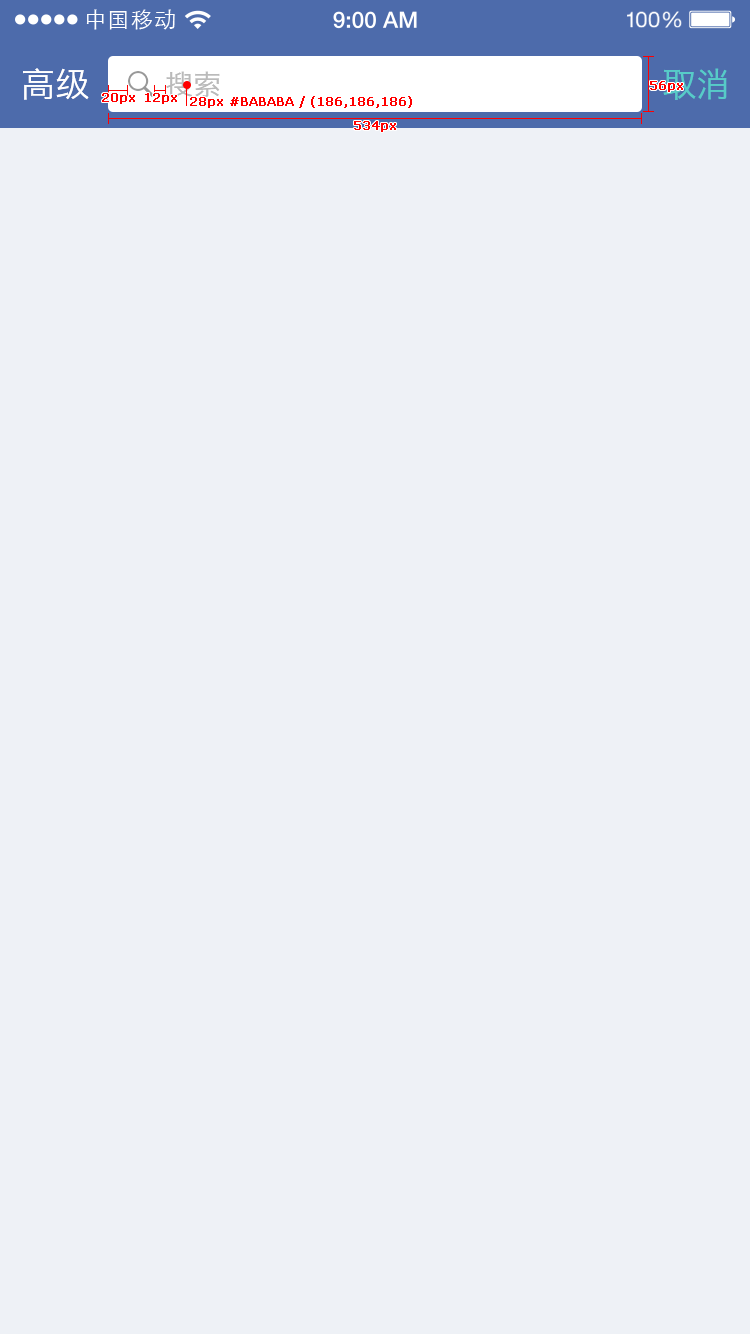
<style>
.page{position:relative;width:750px;height:1334px;background:#eef1f6}
.page>*{position:absolute;margin:0}
.t1{font:21.9px "STXihei";letter-spacing:0.04em;color:#ffffff}
.t2{font:34px "HiraginoSansGB-W3";color:#ffffff}
.t3{font:28px "HiraginoSansGB-W3";color:#bababa}
.t4{font:34px "HiraginoSansGB-W3";color:#57cbc8}
.t5{font:12px "Verdana";color:#ff0000;font-weight:bold}
</style>
<div class="page">
<p class="t1" style="left:86px;top:9px;width:89px;height:21px">中国移动</p>
<p class="t2" style="left:23px;top:68px;width:66px;height:32px">高级</p>
<p class="t3" style="left:166px;top:71px;width:54px;height:26px">搜索</p>
<p class="t4" style="left:663px;top:68px;width:64px;height:32px">取消</p>
<p class="t5" style="left:650px;top:81px;width:33px;height:11px">56px</p>
<p class="t5" style="left:102px;top:93px;width:33px;height:11px">20px</p>
<p class="t5" style="left:145px;top:93px;width:32px;height:11px">12px</p>
<p class="t5" style="left:190px;top:96px;width:222px;height:12px">28px #BABABA / (186,186,186)</p>
<p class="t5" style="left:354px;top:121px;width:42px;height:11px">534px</p>
</div>
